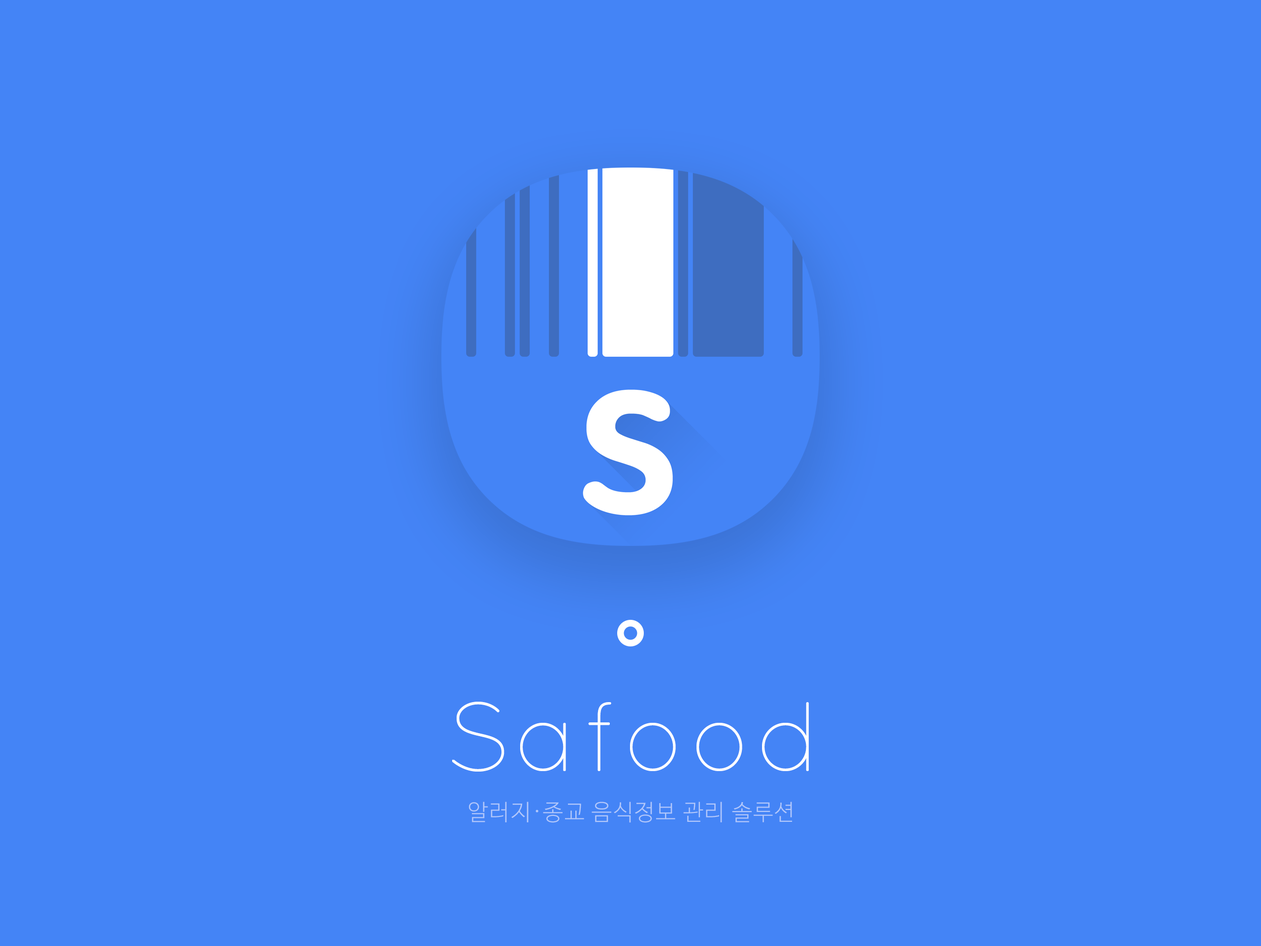
<style>
.page{position:relative;width:1261px;height:946px;background:#4484f6}
.page>*{position:absolute;margin:0}
.t1{font:98.5px "Quicksand-Light";letter-spacing:0.05em;color:#ffffff}
.t2{font:22.6px "NanumBarunGothicLight";letter-spacing:0.05em;color:#b2c8fb}
</style>
<div class="page">
<p class="t1" style="left:452px;top:701px;width:357px;height:70px">Safood</p>
<p class="t2" style="left:469px;top:801px;width:323px;height:22px">알러지·종교 음식정보 관리 솔루션</p>
</div>
